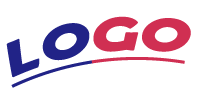
<style>
.page{position:relative;width:200px;height:100px;background:#ffffff}
.page>*{position:absolute;margin:0}
.t1{font:48px "BerlinSansFBDemi-Bold";letter-spacing:0.025em;color:#212387;text-transform:uppercase;font-style:italic;text-decoration:underline}
.t2{font:48px "BerlinSansFBDemi-Bold";letter-spacing:0.025em;color:#d02f52;text-transform:uppercase;font-style:italic;text-decoration:underline}
</style>
<div class="page">
<p class="t1" style="left:6px;top:16px;width:185px;height:72px">Lo<span class="t2">go</span></p>
</div>
